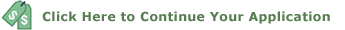
<style>
.page{position:relative;width:345px;height:30px;background:#ffffff}
.page>*{position:absolute;margin:0}
.t1{font:12.5px "Verdana-Bold";letter-spacing:0.025em;color:#587d52}
</style>
<div class="page">
<p class="t1" style="left:42px;top:11px;width:288px;height:13px">Click Here to Continue Your Application</p>
</div>
